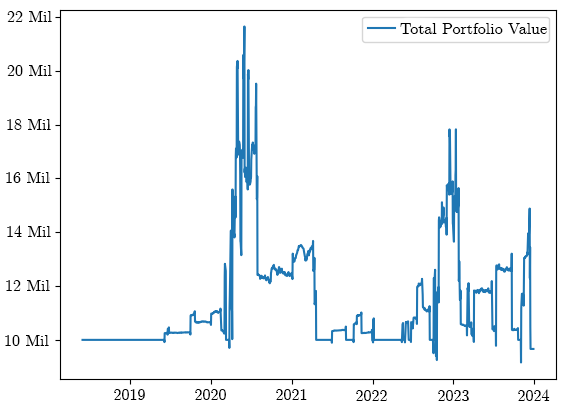
<style>
.page{position:relative;width:565px;height:413px;background:#ffffff}
.page>*{position:absolute;margin:0}
.t1{font:16px "CMUSerif-Roman";color:#000000}
</style>
<div class="page">
<p class="t1" style="left:7px;top:11px;width:45px;height:11px">22 Mil</p>
<p class="t1" style="left:400px;top:23px;width:147px;height:11px">Total Portfolio Value</p>
<p class="t1" style="left:7px;top:65px;width:45px;height:11px">20 Mil</p>
<p class="t1" style="left:7px;top:119px;width:44px;height:11px">18 Mil</p>
<p class="t1" style="left:6px;top:172px;width:44px;height:11px">16 Mil</p>
<p class="t1" style="left:7px;top:225px;width:44px;height:12px">14 Mil</p>
<p class="t1" style="left:6px;top:280px;width:44px;height:11px">12 Mil</p>
<p class="t1" style="left:5px;top:335px;width:44px;height:11px">10 Mil</p>
<p class="t1" style="left:114px;top:389px;width:31px;height:11px">2019</p>
<p class="t1" style="left:195px;top:389px;width:31px;height:11px">2020</p>
<p class="t1" style="left:276px;top:389px;width:31px;height:11px">2021</p>
<p class="t1" style="left:356px;top:390px;width:31px;height:11px">2022</p>
<p class="t1" style="left:438px;top:390px;width:31px;height:11px">2023</p>
<p class="t1" style="left:518px;top:389px;width:32px;height:12px">2024</p>
</div>
